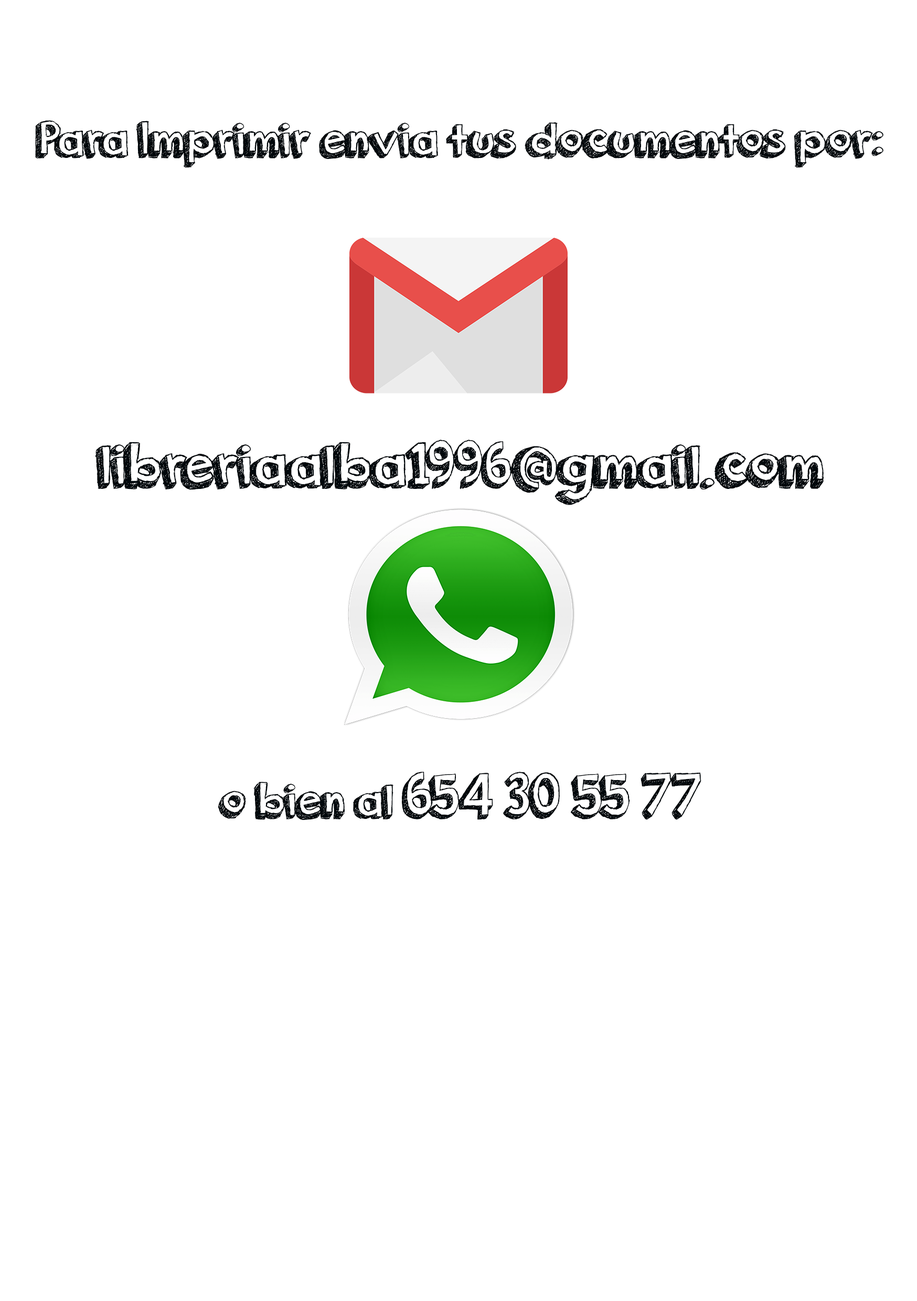
<style>
.page{position:relative;width:917px;height:1301px;background:#ffffff}
.page>*{position:absolute;margin:0}
.t1{font:52.4px "orangejuice";color:#00070b}
.t2{font:65.6px "orangejuice";color:#00070b}
</style>
<div class="page">
<p class="t1" style="left:35px;top:120px;width:848px;height:700px;text-align:center">Para Imprimir envia tus documentos por:<br><br><br><br><br><span class="t2">libreriaalba1996@gmail.com<br></span><br><br><br><br>o bien al <span class="t2">654 30 55 77</span></p>
</div>
